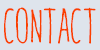
<style>
.page{position:relative;width:100px;height:50px;background:#dee4ec}
.page>*{position:absolute;margin:0}
.t1{font:42px "hellogoodbye";letter-spacing:-0.01em;color:#fa4000}
</style>
<div class="page">
<p class="t1" style="left:4px;top:7px;width:92px;height:37px">contact</p>
</div>
